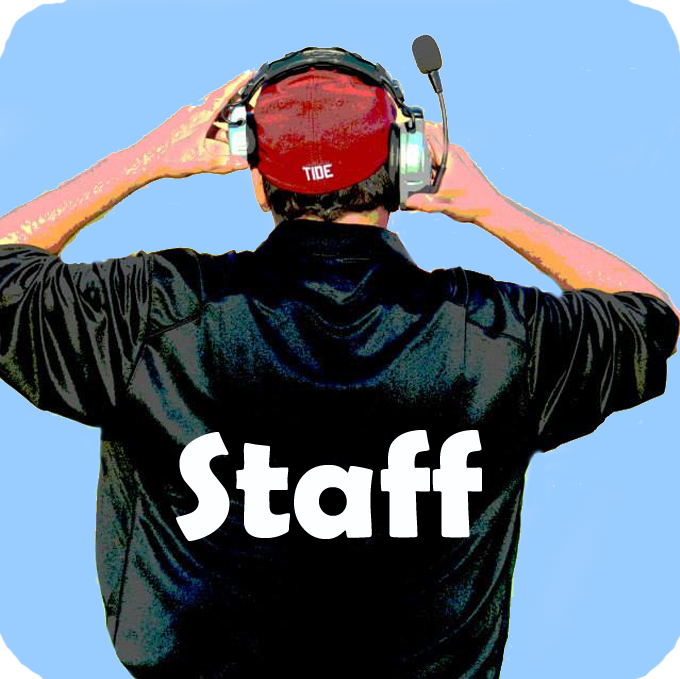
<style>
.page{position:relative;width:680px;height:679px;background:#99ccff}
.page>*{position:absolute;margin:0}
.t1{font:149px "BerlinSansFBDemi-Bold";color:#fdfeff}
</style>
<div class="page">
<p class="t1" style="left:176px;top:430px;width:306px;height:111px">Staff</p>
</div>
